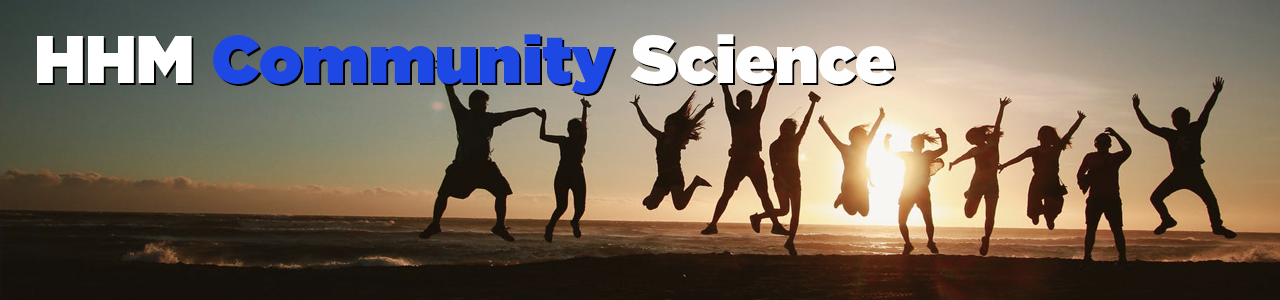
<style>
.page{position:relative;width:1280px;height:300px}
.page>*{position:absolute;margin:0}
.t1{font:66.7px "Gotham-Ultra";color:#1e48e4}
.t2{font:66.7px "Gotham-Ultra";color:#ffffff}
.t3{font:66.7px "Gotham-Ultra";color:#fffefe}
.t4{font:66.7px "Gotham-Ultra"}
</style>
<div class="page">
<p class="t1" style="left:37px;top:34px;width:857px;height:60px"><span class="t2">HHM </span>Community <span class="t3">Science</span></p>
<p class="t4" style="left:39px;top:36px;width:857px;height:60px">HHM Community Science</p>
</div>
